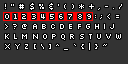
<style>
.page{position:relative;width:128px;height:64px;background:#333333}
.page>*{position:absolute;margin:0}
.t1{font:8px/10px "Silkscreen";letter-spacing:0.4em;color:#ffffff}
</style>
<div class="page">
<p class="t1" style="left:5px;top:3px;width:117px;height:47px">!"#$%&amp;'()*+,-./<br>0123456789:;&lt;=<br>&gt;?@ABCDEFGHIJ<br>KLMNOPQRSTUVW<br>XYZ[\]^_`{|}~</p>
</div>
